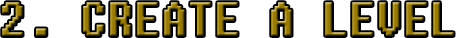
<style>
.page{position:relative;width:456px;height:38px;background:#ffffff}
.page>*{position:absolute;margin:0}
.t1{font:48px "Fixedsys";scale:0.9 1}
</style>
<div class="page">
<p class="t1" style="left:2px;top:2px;width:452px;height:34px">2. CREATE A LEVEL</p>
</div>
